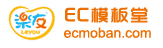
<style>
.page{position:relative;width:163px;height:48px;background:#ffffff}
.page>*{position:absolute;margin:0}
.t1{font:18px "TRENDS";letter-spacing:0.1em;color:#ed6e02}
.t2{font:14px "ArialMT";color:#ed6e02}
</style>
<div class="page">
<p class="t1" style="left:65px;top:7px;width:83px;height:16px">EC模板堂</p>
<p class="t2" style="left:64px;top:27px;width:87px;height:11px">ecmoban.com</p>
</div>
